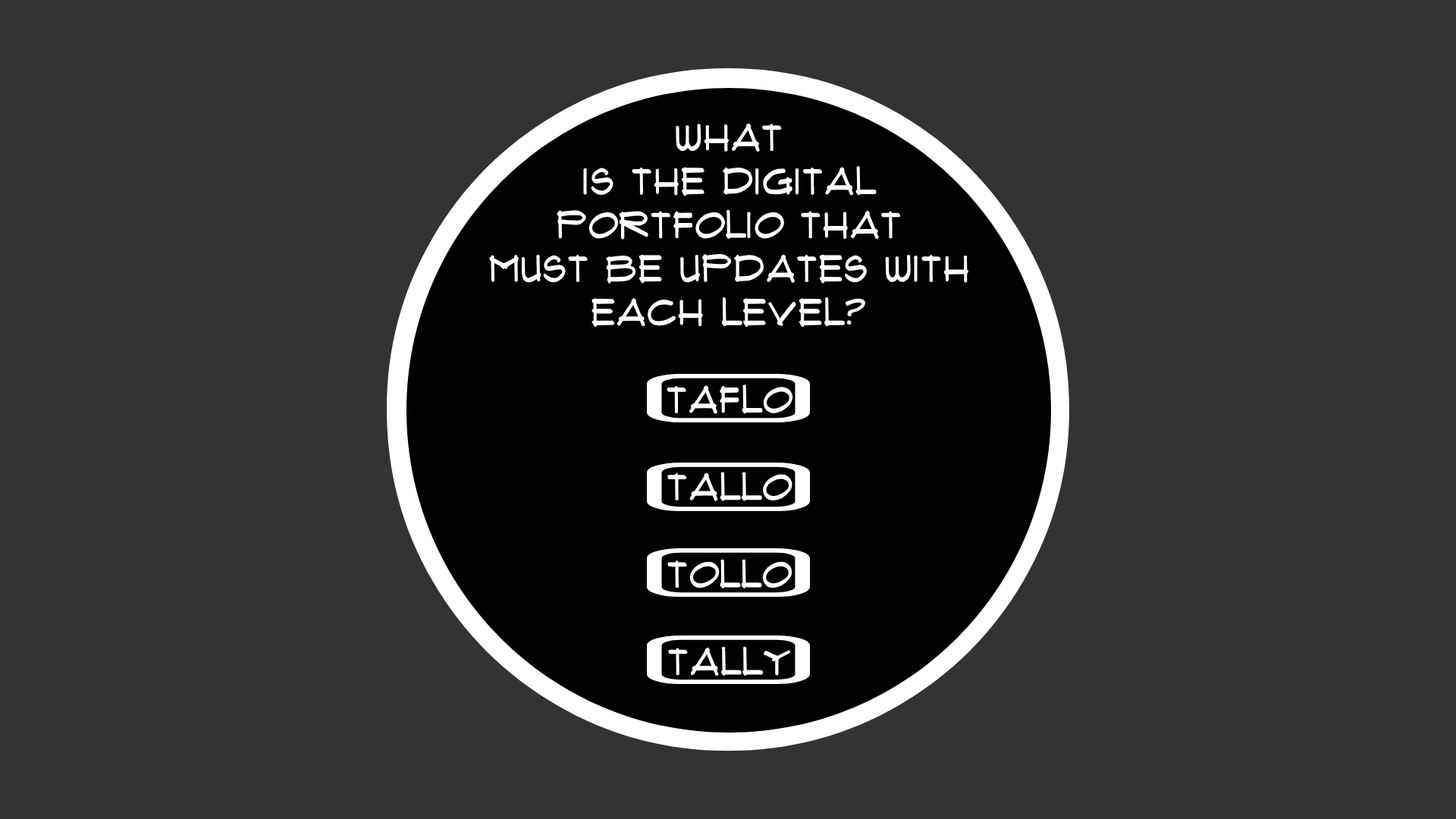
<style>
.page{position:relative;width:1456px;height:819px;background:#333333}
.page>*{position:absolute;margin:0}
.t1{font:36.4px "Flux-Architect";color:#ffffff}
</style>
<div class="page">
<p class="t1" style="left:489px;top:123px;width:479px;height:553px;text-align:center">what is the digital portfolio that must be updates with each level?<br><br>taflo<br><br>tallo<br><br>tollo<br><br>tally</p>
</div>
